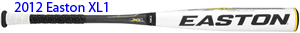
<style>
.page{position:relative;width:300px;height:33px;background:#ffffff}
.page>*{position:absolute;margin:0}
.t1{font:14px "MyriadPro-Regular";color:#0000ff}
</style>
<div class="page">
<p class="t1" style="left:14px;top:2px;width:94px;height:10px">2012 Easton XL1</p>
</div>
